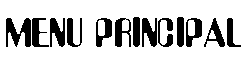
<style>
.page{position:relative;width:246px;height:67px;background:#ffffff}
.page>*{position:absolute;margin:0}
.t1{font:36.6px "Asimov";color:#000000}
</style>
<div class="page">
<p class="t1" style="left:6px;top:17px;width:235px;height:30px">MENU PRINCIPAL</p>
</div>
